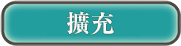
<style>
.page{position:relative;width:181px;height:46px;background:#239e9f}
.page>*{position:absolute;margin:0}
.t1{font:24px "RyuminPr6N-ExBold";color:#fff7f5}
</style>
<div class="page">
<p class="t1" style="left:66px;top:11px;width:48px;height:24px">擴充</p>
</div>
